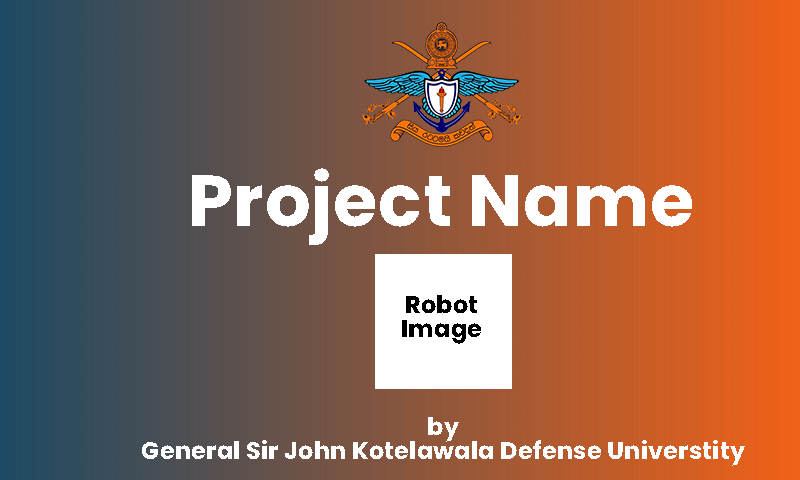
<style>
.page{position:relative;width:800px;height:480px}
.page>*{position:absolute;margin:0}
.t1{font:72px "Poppins-Bold";letter-spacing:0.01em;color:#ffffff}
.t2{font:24px/24px "Poppins-Bold";letter-spacing:0.01em;color:#000000}
.t3{font:24px/24px "Poppins-Bold";letter-spacing:0.01em;color:#ffffff}
</style>
<div class="page">
<p class="t1" style="left:192px;top:168px;width:500px;height:77px">Project Name</p>
<p class="t2" style="left:402px;top:295px;width:79px;height:49px;text-align:center">Robot<br>Image</p>
<p class="t3" style="left:142px;top:417px;width:603px;height:49px;text-align:center">by<br>General Sir John Kotelawala Defense Universtity</p>
</div>
